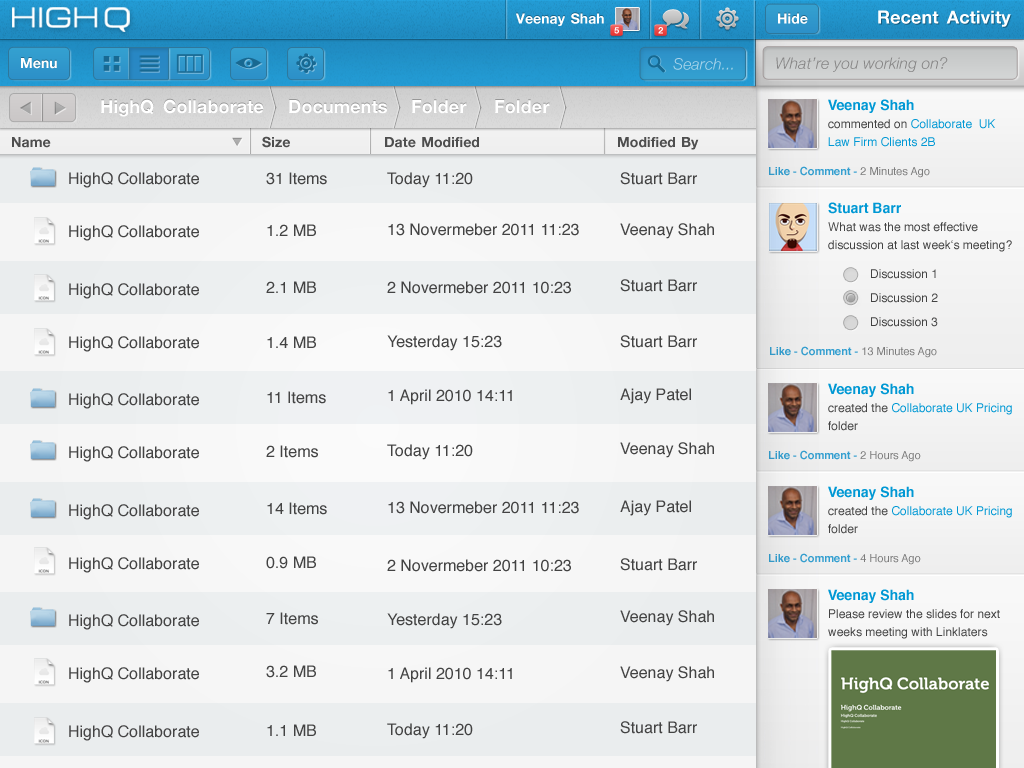
<style>
.page{position:relative;width:1024px;height:768px}
.page>*{position:absolute;margin:0}
.t1{font:14px "HelveticaNeue-Bold";letter-spacing:0.005em;color:#ffffff}
.t2{font:18px "HelveticaNeue-Bold";letter-spacing:0.005em;color:#ffffff}
.t3{font:9px "HelveticaNeue-Bold";letter-spacing:0.005em;color:#ffffff}
.t4{font:15.9px "HelveticaNeue-LightItalic";letter-spacing:0.005em;color:#aad5ea}
.t5{font:15.9px "HelveticaNeue-LightItalic";letter-spacing:0.005em;color:#7e7d7d}
.t6{font:12px/18px "Helvetica";color:#0098d4}
.t7{font:14px/19px "Helvetica-Bold";color:#0098d4}
.t8{font:12px/18px "Helvetica";color:#434343}
.t9{font:14px "HelveticaNeue-Bold";letter-spacing:0.005em;color:#4e4e4e}
.t10{font:16px "Helvetica";color:#434343}
.t11{font:11px "Helvetica-Bold";color:#349fd0}
.t12{font:11px "Helvetica";color:#7c7c7c}
.t13{font:14px/20px "Helvetica-Bold";color:#0098d4}
.t14{font:12px "Helvetica";color:#434343}
</style>
<div class="page">
<p class="t1" style="left:516px;top:13px;width:88px;height:13px">Veenay Shah</p>
<p class="t1" style="left:778px;top:13px;width:30px;height:11px">Hide</p>
<p class="t2" style="left:878px;top:10px;width:133px;height:17px">Recent  Activity</p>
<p class="t3" style="left:614px;top:27px;width:5px;height:7px">5</p>
<p class="t3" style="left:658px;top:27px;width:5px;height:7px">2</p>
<p class="t1" style="left:21px;top:58px;width:36px;height:11px">Menu</p>
<p class="t4" style="left:673px;top:58px;width:60px;height:12px">Search...</p>
<p class="t5" style="left:776px;top:57px;width:172px;height:15px;opacity:0.9">What’re you working on?</p>
<p class="t2" style="left:101px;top:99px;width:163px;height:18px">HighQ  Collaborate</p>
<p class="t2" style="left:289px;top:100px;width:98px;height:14px">Documents</p>
<p class="t2" style="left:412px;top:100px;width:55px;height:14px">Folder</p>
<p class="t2" style="left:495px;top:100px;width:55px;height:14px">Folder</p>
<p class="t6" style="left:828px;top:99px;width:168px;height:48px"><span class="t7">Veenay Shah <br></span><span class="t8">commented on </span>Collaborate  UK Law Firm Clients 2B</p>
<p class="t9" style="left:12px;top:137px;width:39px;height:11px">Name</p>
<p class="t9" style="left:262px;top:136px;width:28px;height:12px">Size</p>
<p class="t9" style="left:385px;top:137px;width:94px;height:11px">Date Modified</p>
<p class="t9" style="left:618px;top:137px;width:81px;height:13px">Modified  By</p>
<p class="t10" style="left:266px;top:172px;width:61px;height:13px">31 Items</p>
<p class="t10" style="left:620px;top:172px;width:77px;height:13px">Stuart Barr</p>
<p class="t11" style="left:769px;top:166px;width:161px;height:12px">Like - Comment -<span class="t12"> 2 Minutes Ago</span></p>
<p class="t8" style="left:828px;top:202px;width:184px;height:50px"><span class="t13">Stuart Barr <br></span>What was the most effective discussion at last week‘s meeting?</p>
<p class="t10" style="left:267px;top:224px;width:49px;height:12px">1.2 MB</p>
<p class="t10" style="left:620px;top:223px;width:94px;height:16px">Veenay Shah</p>
<p class="t14" style="left:871px;top:269px;width:65px;height:10px">Discussion 1</p>
<p class="t10" style="left:266px;top:281px;width:50px;height:12px">2.1 MB</p>
<p class="t10" style="left:620px;top:279px;width:77px;height:13px">Stuart Barr</p>
<p class="t14" style="left:871px;top:293px;width:67px;height:10px">Discussion 2</p>
<p class="t14" style="left:871px;top:317px;width:67px;height:10px">Discussion 3</p>
<p class="t10" style="left:267px;top:336px;width:49px;height:12px">1.4 MB</p>
<p class="t10" style="left:620px;top:335px;width:77px;height:13px">Stuart Barr</p>
<p class="t11" style="left:770px;top:346px;width:167px;height:12px">Like - Comment - <span class="t12">13 Minutes Ago</span></p>
<p class="t10" style="left:620px;top:388px;width:71px;height:16px">Ajay Patel</p>
<p class="t6" style="left:828px;top:383px;width:184px;height:48px"><span class="t7">Veenay Shah <br></span><span class="t8">created the </span>Collaborate UK Pricing <span class="t8">folder</span></p>
<p class="t10" style="left:267px;top:391px;width:59px;height:13px">11 Items</p>
<p class="t10" style="left:266px;top:445px;width:52px;height:13px">2 Items</p>
<p class="t10" style="left:620px;top:442px;width:94px;height:16px">Veenay Shah</p>
<p class="t11" style="left:769px;top:450px;width:152px;height:12px">Like - Comment -<span class="t12"> 2 Hours Ago</span></p>
<p class="t6" style="left:828px;top:486px;width:184px;height:48px"><span class="t7">Veenay Shah <br></span><span class="t8">created the </span>Collaborate UK Pricing <span class="t8">folder</span></p>
<p class="t10" style="left:267px;top:502px;width:60px;height:13px">14 Items</p>
<p class="t10" style="left:620px;top:500px;width:71px;height:16px">Ajay Patel</p>
<p class="t10" style="left:266px;top:556px;width:50px;height:13px">0.9 MB</p>
<p class="t10" style="left:620px;top:558px;width:77px;height:13px">Stuart Barr</p>
<p class="t11" style="left:769px;top:553px;width:152px;height:12px">Like - Comment -<span class="t12"> 4 Hours Ago</span></p>
<p class="t8" style="left:828px;top:589px;width:172px;height:50px"><span class="t7">Veenay Shah <br></span>Please review the slides for next weeks meeting with Linklaters</p>
<p class="t10" style="left:266px;top:612px;width:52px;height:13px">7 Items</p>
<p class="t10" style="left:620px;top:610px;width:94px;height:16px">Veenay Shah</p>
<p class="t10" style="left:266px;top:665px;width:50px;height:13px">3.2 MB</p>
<p class="t10" style="left:620px;top:666px;width:94px;height:16px">Veenay Shah</p>
<p class="t10" style="left:267px;top:724px;width:49px;height:12px">1.1 MB</p>
<p class="t10" style="left:620px;top:721px;width:77px;height:13px">Stuart Barr</p>
</div>
